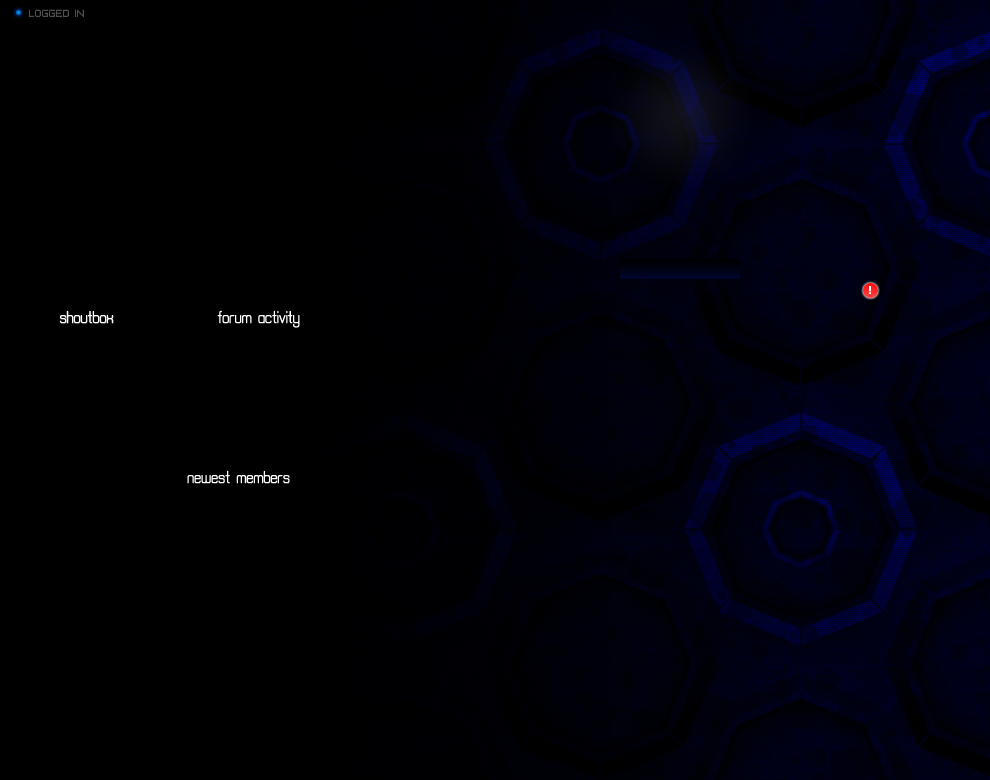
<style>
.page{position:relative;width:990px;height:780px;background:#000000}
.page>*{position:absolute;margin:0}
.t1{font:8px "PFTempestaSevenExtended";color:#4f4f4f}
.t2{font:18px "aposiopesisnormal";color:#ffffff}
</style>
<div class="page">
<p class="t1" style="left:29px;top:9px;width:55px;height:8px">LOGGED IN</p>
<p class="t2" style="left:59px;top:310px;width:55px;height:14px">shoutbox</p>
<p class="t2" style="left:217px;top:310px;width:83px;height:18px">forum activity</p>
<p class="t2" style="left:187px;top:470px;width:103px;height:14px">newest members</p>
</div>
